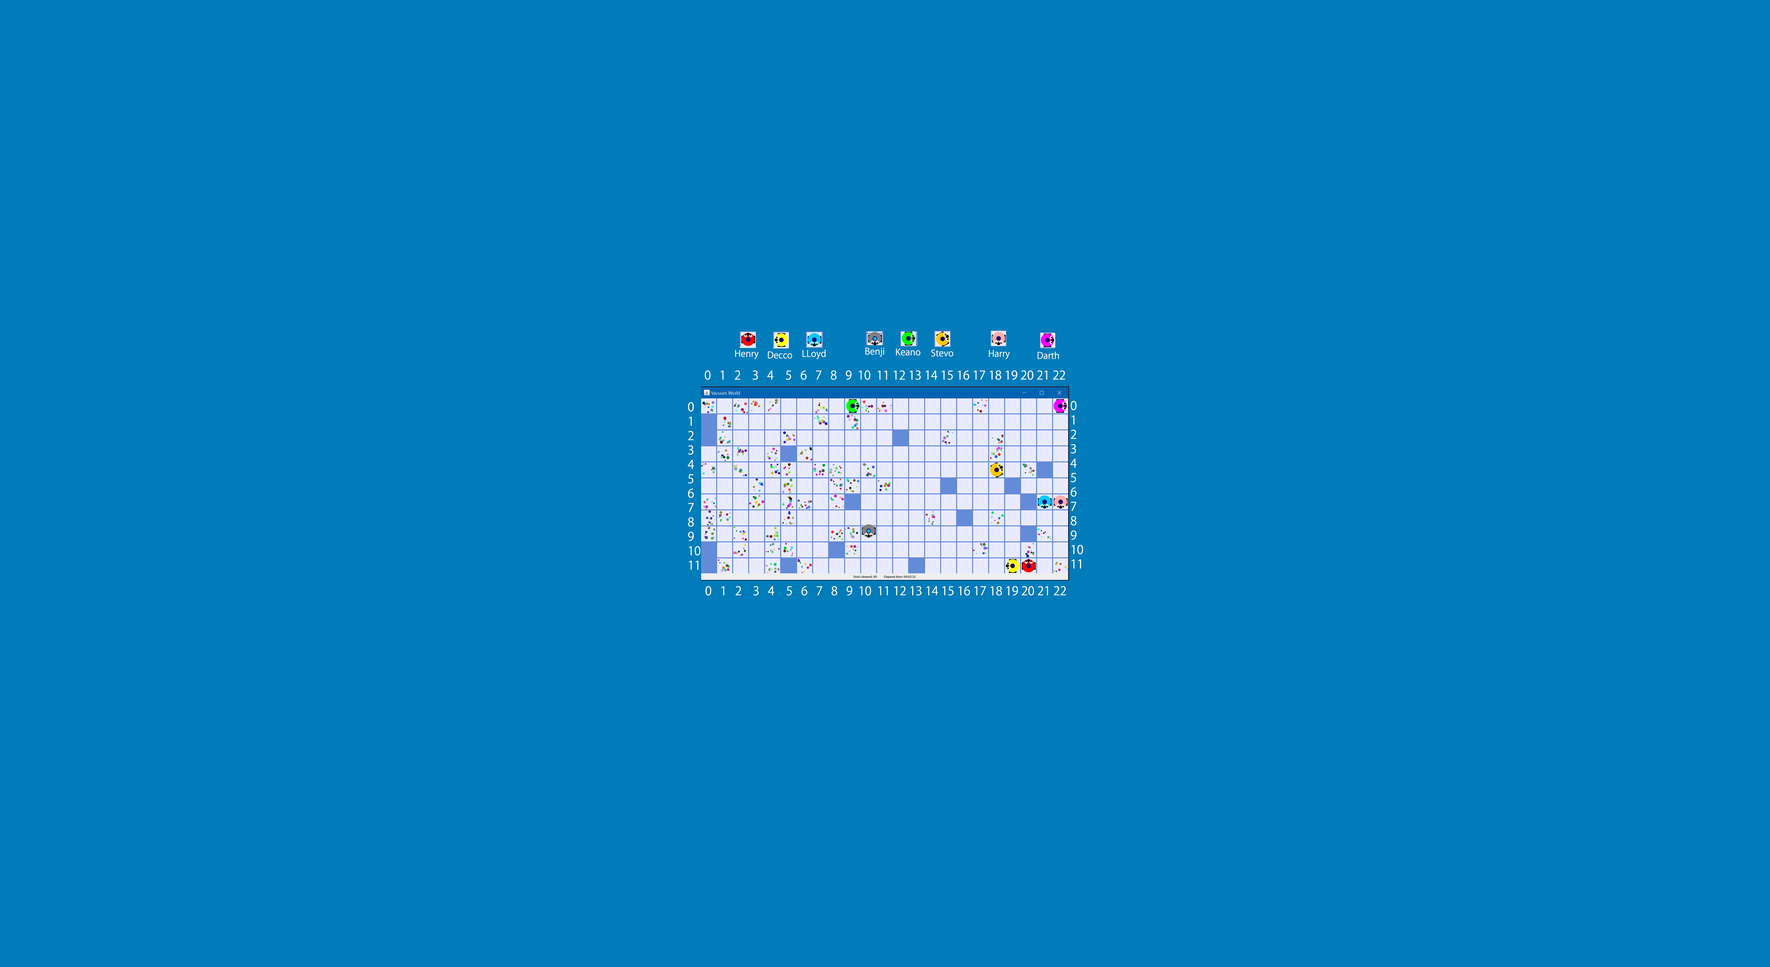
<style>
.page{position:relative;width:1770px;height:967px;background:#007cba}
.page>*{position:absolute;margin:0}
.t1{font:9px "KozGoPr6N-Regular";color:#ffffff}
.t2{font:12px "KozGoPr6N-Regular";color:#ffffff}
</style>
<div class="page">
<p class="t1" style="left:735px;top:350px;width:24px;height:9px">Henry</p>
<p class="t1" style="left:768px;top:352px;width:24px;height:7px">Decco</p>
<p class="t1" style="left:802px;top:350px;width:24px;height:9px">LLoyd</p>
<p class="t1" style="left:866px;top:348px;width:18px;height:9px">Benji</p>
<p class="t1" style="left:896px;top:348px;width:24px;height:8px">Keano</p>
<p class="t1" style="left:931px;top:349px;width:23px;height:8px">Stevo</p>
<p class="t1" style="left:989px;top:350px;width:21px;height:9px">Harry</p>
<p class="t1" style="left:1038px;top:352px;width:21px;height:7px">Darth</p>
<p class="t2" style="left:705px;top:370px;width:360px;height:10px">0   1   2    3   4  5   6   7   8   9  10  11 12 13 14 15 16 17 18 19 20 21 22</p>
<p class="t2" style="left:1070px;top:401px;width:13px;height:168px">0<br>1<br>2<br>3<br>4<br>5<br>6<br>7<br>8<br>9<br>10<br>11</p>
<p class="t2" style="left:688px;top:402px;width:12px;height:168px">0<br>1<br>2<br>3<br>4<br>5<br>6<br>7<br>8<br>9<br>10<br>11</p>
<p class="t2" style="left:706px;top:586px;width:360px;height:10px">0   1   2    3   4  5   6   7   8   9  10  11 12 13 14 15 16 17 18 19 20 21 22</p>
</div>
